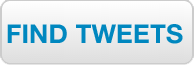
<style>
.page{position:relative;width:194px;height:65px}
.page>*{position:absolute;margin:0}
.t1{font:26px "HelveticaNeue-Bold";letter-spacing:0.005em;color:#0087bf}
</style>
<div class="page">
<p class="t1" style="left:7px;top:24px;width:176px;height:20px">FIND TWEETS</p>
</div>
